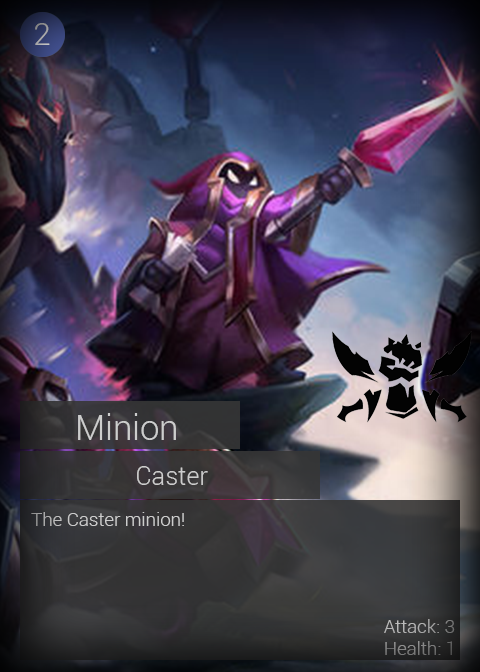
<style>
.page{position:relative;width:480px;height:672px}
.page>*{position:absolute;margin:0}
.t1{font:32px "Roboto-Light"}
.t2{font:34.7px "Roboto-Light";color:#cdcdcd}
.t3{font:25.3px "Roboto-Light";color:#cdcdcd}
.t4{font:18.7px "Roboto-Light";color:#cdcdcd}
.t5{font:18.7px "Roboto-Light"}
</style>
<div class="page">
<p class="t1" style="left:35px;top:23px;width:15px;height:22px">2</p>
<p class="t2" style="left:78px;top:413px;width:98px;height:27px">Minion</p>
<p class="t3" style="left:137px;top:466px;width:71px;height:19px">Caster</p>
<p class="t4" style="left:31px;top:512px;width:153px;height:14px">The Caster minion!</p>
<p class="t5" style="left:384px;top:619px;width:71px;height:36px">Attack: 3<br>Health: 1</p>
</div>
